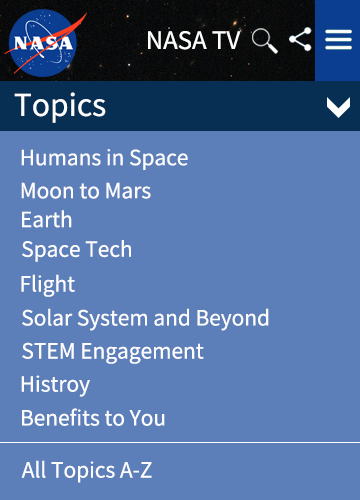
<style>
.page{position:relative;width:360px;height:500px;background:#5d7fb9}
.page>*{position:absolute;margin:0}
.t1{font:24px "NotoSansKR-Regular";color:#fdfdfd}
.t2{font:30px "NotoSansKR-Regular";color:#fdfdfd}
.t3{font:20.9px "NotoSansKR-Regular";color:#fdfdfd}
</style>
<div class="page">
<p class="t1" style="left:148px;top:31px;width:93px;height:19px">NASA TV</p>
<p class="t2" style="left:14px;top:92px;width:92px;height:31px">Topics</p>
<p class="t3" style="left:21px;top:148px;width:167px;height:22px">Humans in Space</p>
<p class="t3" style="left:21px;top:182px;width:130px;height:17px">Moon to Mars</p>
<p class="t3" style="left:22px;top:210px;width:50px;height:18px">Earth</p>
<p class="t3" style="left:22px;top:240px;width:109px;height:22px">Space Tech</p>
<p class="t3" style="left:21px;top:274px;width:54px;height:23px">Flight</p>
<p class="t3" style="left:22px;top:308px;width:247px;height:23px">Solar System and Beyond</p>
<p class="t3" style="left:22px;top:342px;width:182px;height:22px">STEM Engagement</p>
<p class="t3" style="left:21px;top:375px;width:69px;height:22px">Histroy</p>
<p class="t3" style="left:22px;top:408px;width:143px;height:18px">Benefits to You</p>
<p class="t3" style="left:21px;top:460px;width:131px;height:23px">All Topics A-Z</p>
</div>
